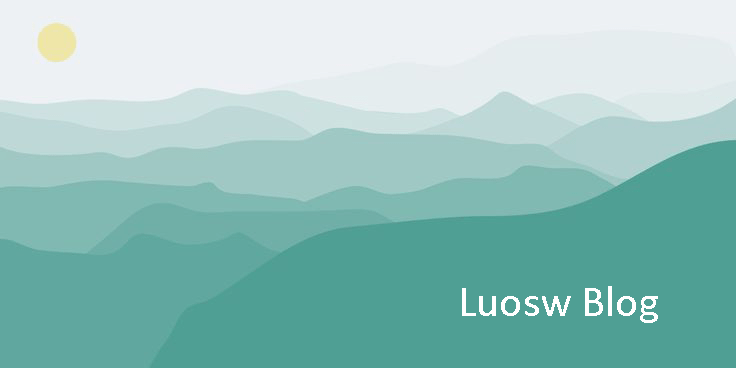
<style>
.page{position:relative;width:736px;height:368px;background:#4f9f94}
.page>*{position:absolute;margin:0}
.t1{font:44px "Calibri";color:#ffffff}
</style>
<div class="page">
<p class="t1" style="left:462px;top:286px;width:196px;height:37px">Luosw Blog</p>
</div>
